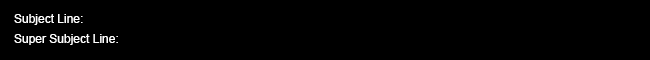
<style>
.page{position:relative;width:650px;height:60px;background:#000000}
.page>*{position:absolute;margin:0}
.t1{font:12px "ArialMT";color:#ffffff}
</style>
<div class="page">
<p class="t1" style="left:14px;top:14px;width:69px;height:11px">Subject Line:</p>
<p class="t1" style="left:14px;top:34px;width:104px;height:11px">Super Subject Line:</p>
</div>
